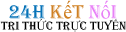
<style>
.page{position:relative;width:126px;height:32px;background:#ffffff}
.page>*{position:absolute;margin:0}
.t1{font:20px "Algerian";color:#0773b8}
.t2{font:20px "Algerian";color:#cf8023}
.t3{font:20px "TimesNewRomanPSMT";color:#cf8023}
.t4{font:20px "Algerian";color:#e881f7}
.t5{font:20px "TimesNewRomanPSMT";color:#e881f7}
.t6{font:12px "Algerian";color:#000000}
.t7{font:12px "TimesNewRomanPSMT";color:#000000}
</style>
<div class="page">
<p class="t1" style="left:9px;top:0px;width:108px;height:19px">24H <span class="t2">K</span><span class="t3">ế</span><span class="t2">t </span><span class="t4">n</span><span class="t5">ố</span><span class="t4">i</span></p>
<p class="t6" style="left:0px;top:19px;width:126px;height:13px">TRI TH<span class="t7">Ứ</span>C TR<span class="t7">Ự</span>C TUY<span class="t7">Ế</span>N</p>
</div>
